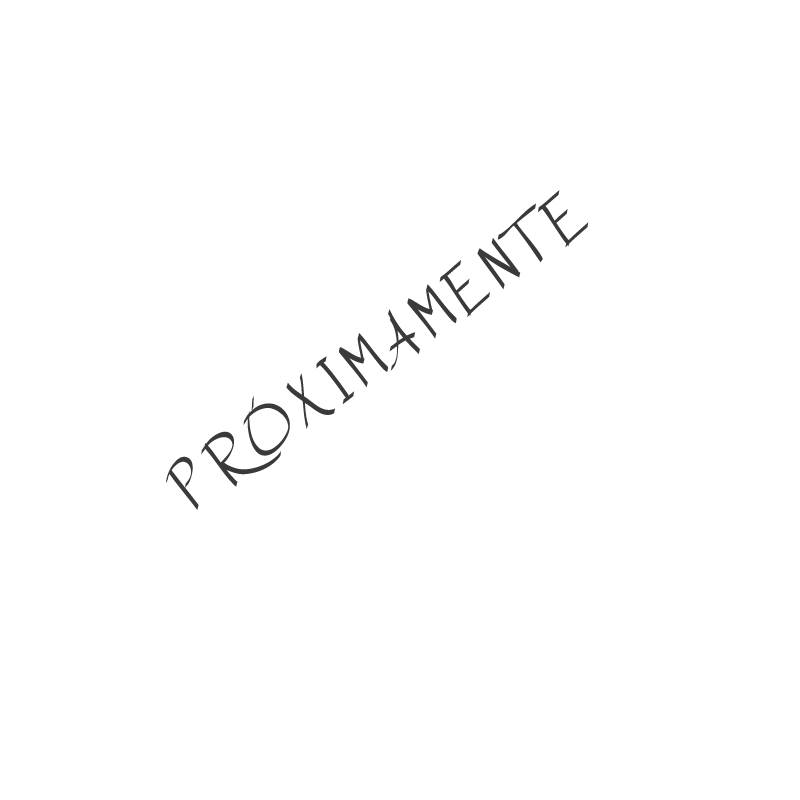
<style>
.page{position:relative;width:800px;height:800px;background:#ffffff}
.page>*{position:absolute;margin:0}
.t1{font:61px "AustieBostMatamata";letter-spacing:0.1em;color:#3a3a3a;scale:1.13 1}
</style>
<div class="page">
<p class="t1" style="left:166px;top:190px;width:423px;height:320px;rotate:-35deg">PRÓXIMAMENTE</p>
</div>
